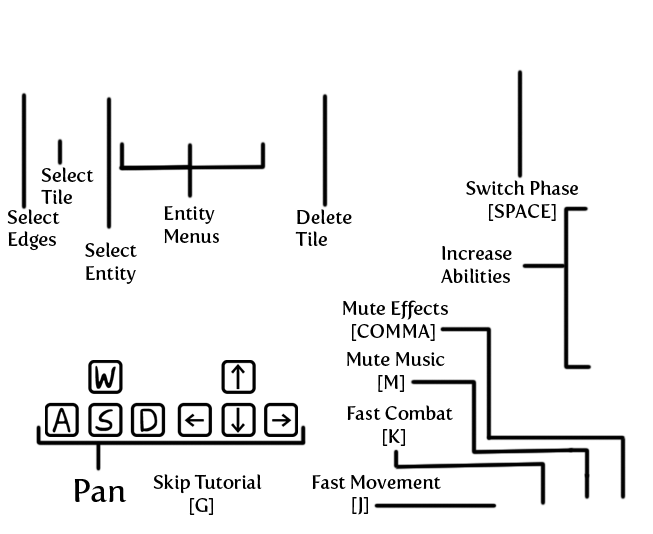
<style>
.page{position:relative;width:653px;height:534px;background:#ffffff}
.page>*{position:absolute;margin:0}
.t1{font:18.7px "FertigoPro-Regular";color:#000000}
.t2{font:32px "FertigoPro-Regular";color:#000000}
</style>
<div class="page">
<p class="t1" style="left:41px;top:167px;width:53px;height:37px">Select<br>Tile</p>
<p class="t1" style="left:466px;top:180px;width:113px;height:41px">Switch Phase<br>     [SPACE]</p>
<p class="t1" style="left:7px;top:209px;width:53px;height:42px">Select<br>Edges</p>
<p class="t1" style="left:164px;top:206px;width:55px;height:38px">Entity<br>Menus</p>
<p class="t1" style="left:295px;top:209px;width:57px;height:37px">Delete<br>Tile</p>
<p class="t1" style="left:85px;top:242px;width:52px;height:42px">Select<br>Entity</p>
<p class="t1" style="left:441px;top:246px;width:71px;height:37px">Increase<br>Abilities</p>
<p class="t1" style="left:343px;top:300px;width:105px;height:41px">Mute Effects<br>  [COMMA]</p>
<p class="t1" style="left:347px;top:351px;width:98px;height:41px">Mute Music<br>       [M]</p>
<p class="t1" style="left:347px;top:405px;width:106px;height:41px">Fast Combat<br>        [K]</p>
<p class="t2" style="left:74px;top:479px;width:53px;height:23px">Pan</p>
<p class="t1" style="left:153px;top:474px;width:109px;height:41px">Skip Tutorial<br>        [G]</p>
<p class="t1" style="left:312px;top:474px;width:129px;height:41px">Fast Movement<br>         [J]</p>
</div>
